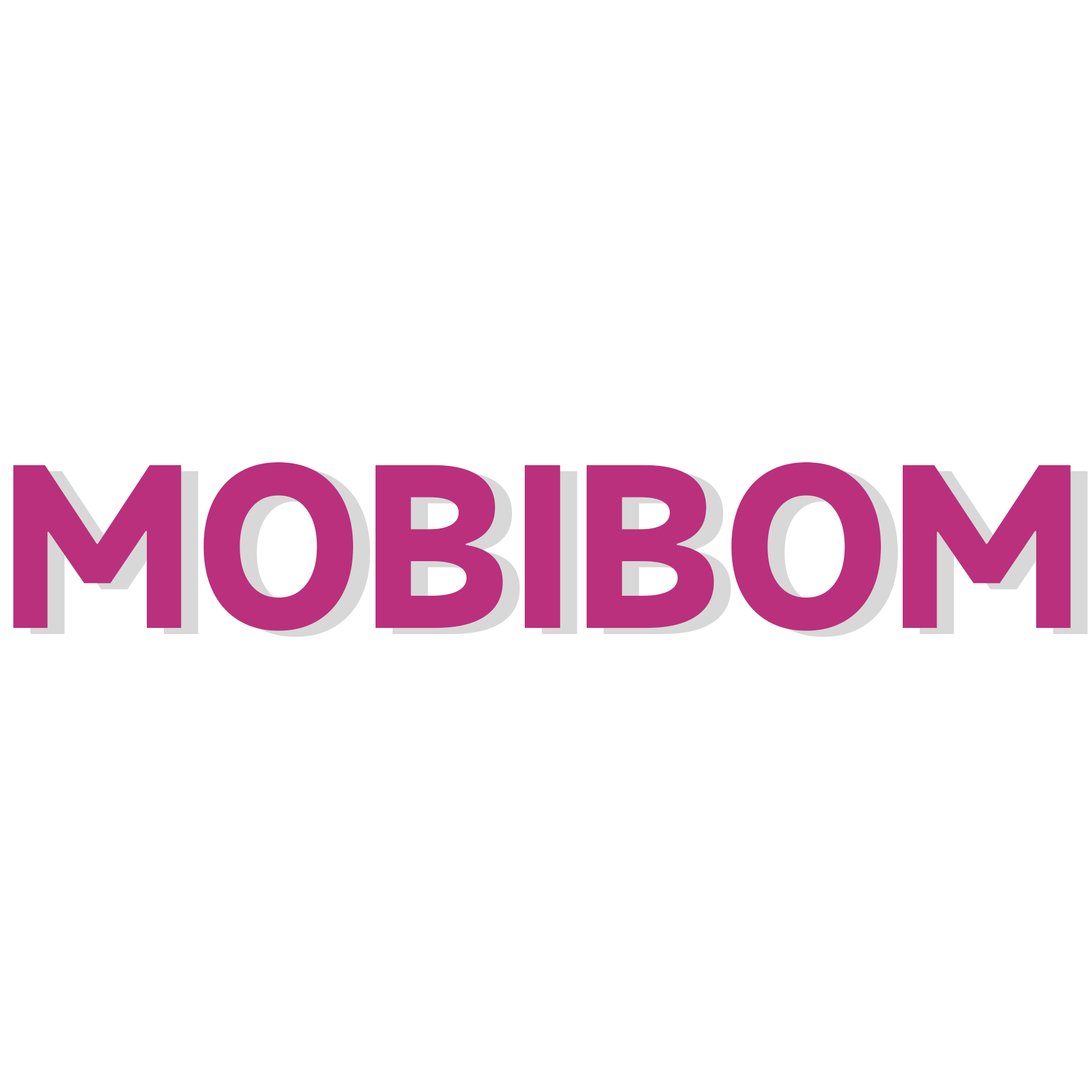
<style>
.page{position:relative;width:1092px;height:1092px;background:#ffffff}
.page>*{position:absolute;margin:0}
.t1{font:202.2px "MiSans-Bold";color:#ba307c}
</style>
<div class="page">
<p class="t1" style="left:13px;top:462px;width:1058px;height:169px">MOBIBOM</p>
</div>
